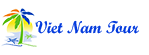
<style>
.page{position:relative;width:149px;height:55px;background:#ffffff}
.page>*{position:absolute;margin:0}
.t1{font:17.3px "ScriptMTBold";color:#023add}
</style>
<div class="page">
<p class="t1" style="left:36px;top:20px;width:103px;height:14px">Viet Nam Tour</p>
</div>
